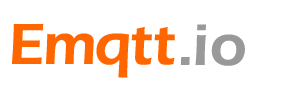
<style>
.page{position:relative;width:284px;height:86px;background:#ffffff}
.page>*{position:absolute;margin:0}
.t1{font:60px "ErasITC-Demi";letter-spacing:0.05em;color:#ff6600}
.t2{font:60px "ErasITC-Demi";letter-spacing:0.1em;color:#999999}
</style>
<div class="page">
<p class="t1" style="left:12px;top:24px;width:163px;height:54px">Emqtt</p>
<p class="t2" style="left:180px;top:24px;width:65px;height:42px">.io</p>
</div>
